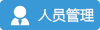
<style>
.page{position:relative;width:100px;height:30px;background:#3998d6}
.page>*{position:absolute;margin:0}
.t1{font:14px "MicrosoftYaHei";color:#ffffff}
</style>
<div class="page">
<p class="t1" style="left:38px;top:8px;width:57px;height:15px">人员管理</p>
</div>
